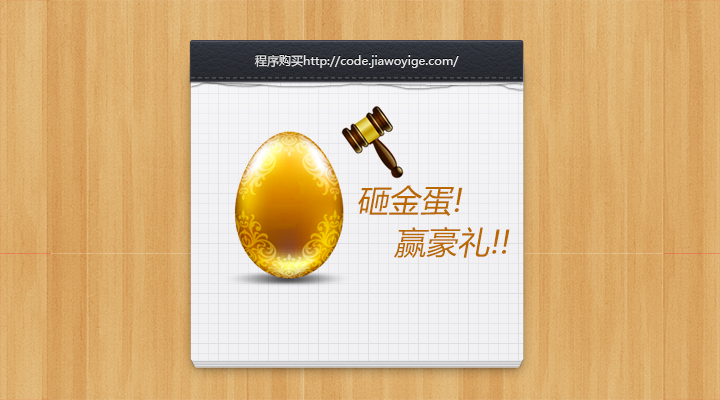
<style>
.page{position:relative;width:720px;height:400px}
.page>*{position:absolute;margin:0}
.t1{font:12px "MicrosoftYaHei";color:#e6e6e6}
.t2{font:31.7px/41.7px "MicrosoftYaHei";color:#b96900;font-style:italic}
</style>
<div class="page">
<p class="t1" style="left:254px;top:55px;width:205px;height:13px">程序购买http://code.jiawoyige.com/</p>
<p class="t2" style="left:358px;top:185px;width:152px;height:73px">砸金蛋!<br>    赢豪礼!!</p>
</div>
